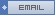
<style>
.page{position:relative;width:55px;height:15px;background:#5176b5}
.page>*{position:absolute;margin:0}
.t1{font:8px "BitDustTwo";color:#666666}
</style>
<div class="page">
<p class="t1" style="left:19px;top:5px;width:25px;height:5px">EMAIL</p>
</div>
